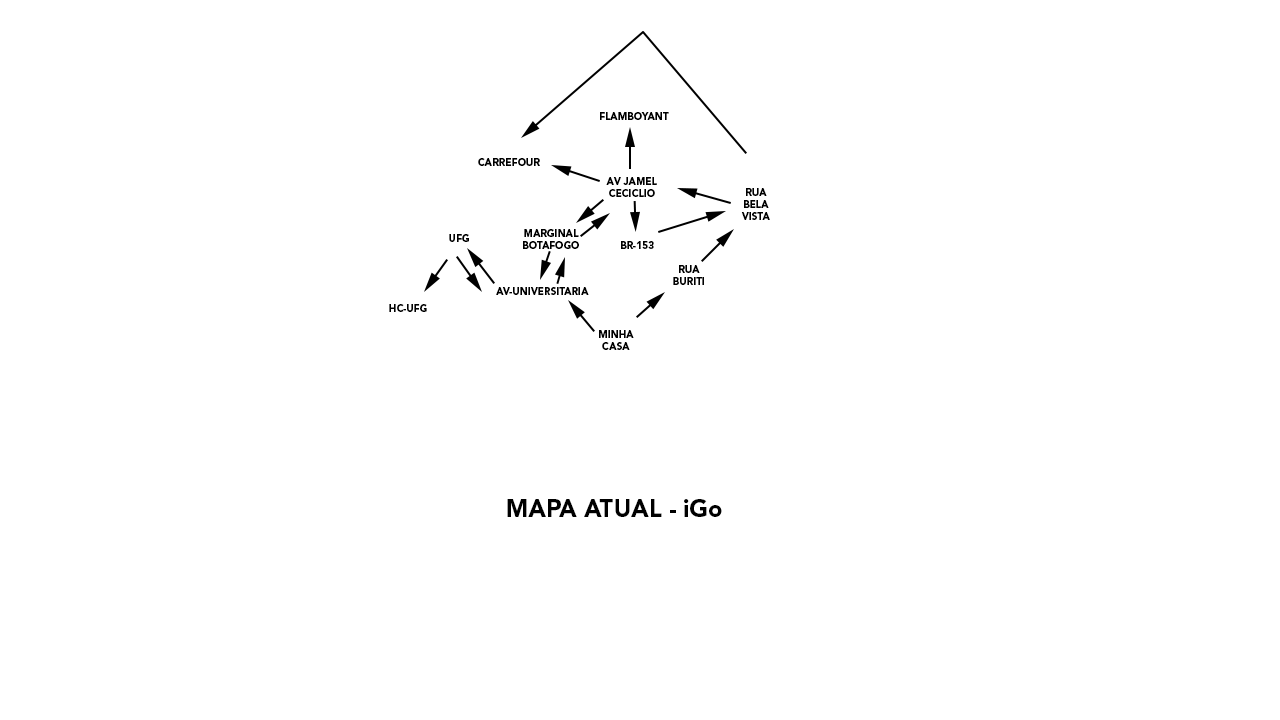
<style>
.page{position:relative;width:1280px;height:720px;background:#ffffff}
.page>*{position:absolute;margin:0}
.t1{font:10px "AvenirLTStd-Black";color:#000000}
.t2{font:24px "AvenirLTStd-Black";color:#000000}
</style>
<div class="page">
<p class="t1" style="left:600px;top:112px;width:69px;height:8px">FLAMBOYANT</p>
<p class="t1" style="left:478px;top:158px;width:62px;height:8px">CARREFOUR</p>
<p class="t1" style="left:606px;top:177px;width:51px;height:20px;text-align:center">AV JAMEL<br>CECICLIO</p>
<p class="t1" style="left:741px;top:188px;width:29px;height:32px;text-align:center">RUA<br>BELA<br>VISTA</p>
<p class="t1" style="left:523px;top:229px;width:56px;height:20px;text-align:center">MARGINAL<br>BOTAFOGO</p>
<p class="t1" style="left:449px;top:234px;width:20px;height:8px">UFG</p>
<p class="t1" style="left:621px;top:241px;width:33px;height:8px">BR-153</p>
<p class="t1" style="left:673px;top:265px;width:31px;height:20px;text-align:center">RUA <br>BURITI</p>
<p class="t1" style="left:496px;top:287px;width:93px;height:8px">AV-UNIVERSITARIA</p>
<p class="t1" style="left:389px;top:304px;width:38px;height:8px">HC-UFG</p>
<p class="t1" style="left:599px;top:330px;width:35px;height:20px;text-align:center">MINHA<br>CASA</p>
<p class="t2" style="left:507px;top:499px;width:215px;height:18px">MAPA ATUAL - iGo</p>
</div>
